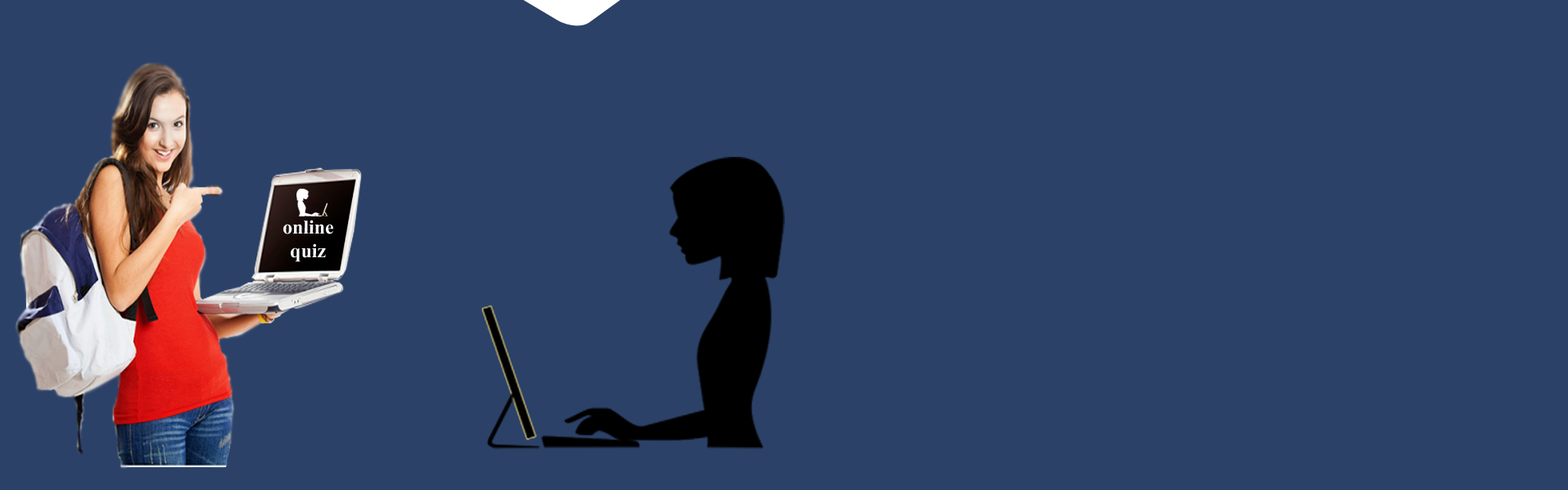
<style>
.page{position:relative;width:1568px;height:490px;background:#2c4167}
.page>*{position:absolute;margin:0}
.t1{font:19.6px "TimesNewRomanPS-BoldMT";color:#f7f9fd}
</style>
<div class="page">
<p class="t1" style="left:283px;top:220px;width:51px;height:42px;text-align:center">online<br>quiz</p>
</div>
